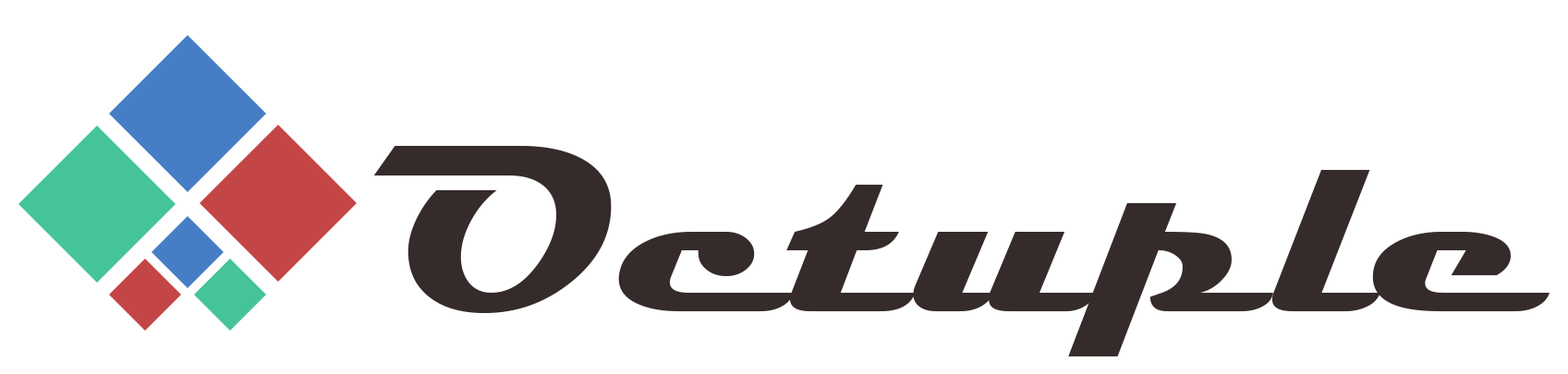
<style>
.page{position:relative;width:1568px;height:374px;background:#ffffff}
.page>*{position:absolute;margin:0}
.t1{font:240px "Magneto-Bold";color:#352b2b;scale:1.17 1}
</style>
<div class="page">
<p class="t1" style="left:373px;top:146px;width:1177px;height:211px">Octuple</p>
</div>
